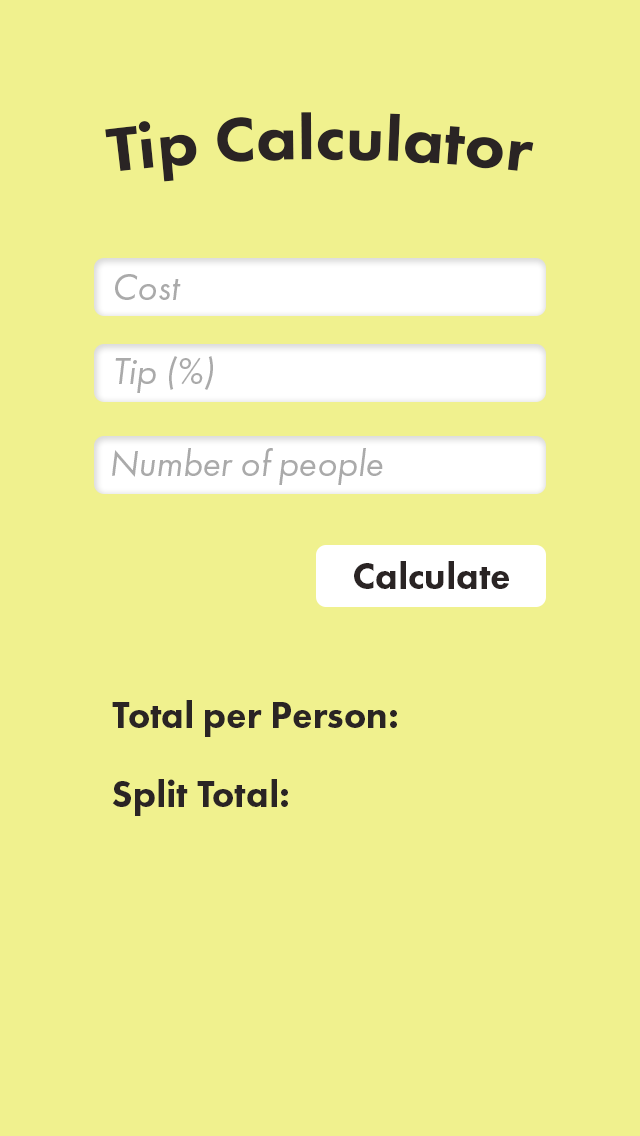
<style>
.page{position:relative;width:640px;height:1136px;background:#f0f18e}
.page>*{position:absolute;margin:0}
.t1{font:65px "FuturaPT-Heavy";color:#2a2424}
.t2{font:38px "FuturaPT-BookObl";color:#aaaaaa}
.t3{font:38px "FuturaPT-Heavy";color:#2a2424}
</style>
<div class="page">
<p class="t1" style="left:105px;top:112px;width:429px;height:70px">Tip Calculator</p>
<p class="t2" style="left:115px;top:274px;width:66px;height:26px">Cost</p>
<p class="t2" style="left:115px;top:356px;width:98px;height:37px">Tip (%)</p>
<p class="t2" style="left:112px;top:448px;width:271px;height:37px">Number of people</p>
<p class="t3" style="left:354px;top:561px;width:155px;height:28px">Calculate</p>
<p class="t3" style="left:112px;top:700px;width:285px;height:37px">Total per Person:</p>
<p class="t3" style="left:112px;top:779px;width:176px;height:37px">Split Total:</p>
</div>
